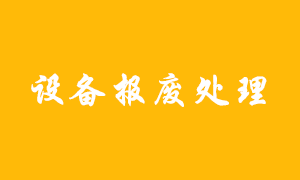
<style>
.page{position:relative;width:300px;height:180px;background:#ffba08}
.page>*{position:absolute;margin:0}
.t1{font:40px "SingkaiCSEG-Bold-GB";color:#ffffff;font-weight:bold}
</style>
<div class="page">
<p class="t1" style="left:31px;top:73px;width:236px;height:34px">设备报废处理</p>
</div>
